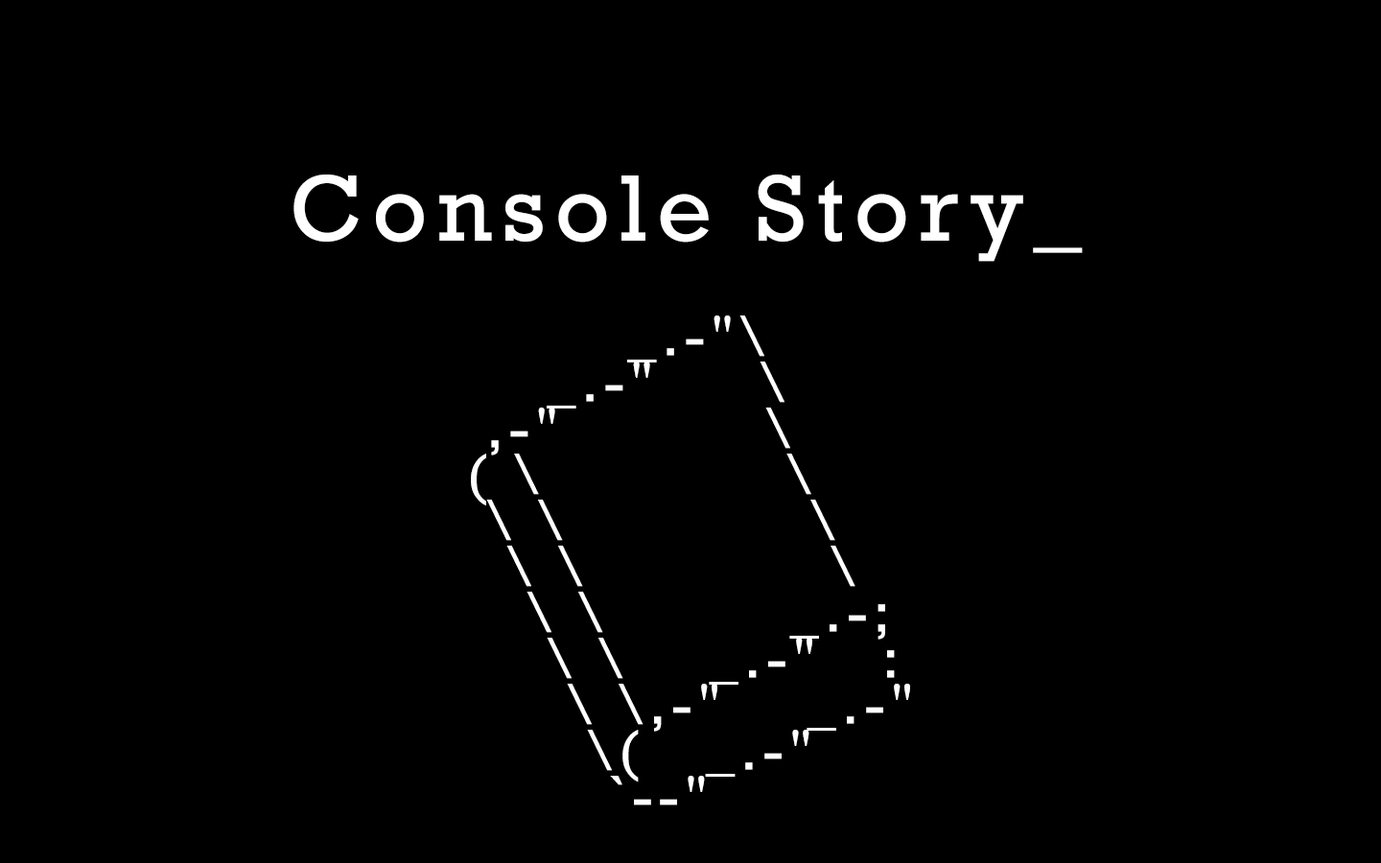
<style>
.page{position:relative;width:1381px;height:863px;background:#000000}
.page>*{position:absolute;margin:0}
.t1{font:95.9px "Rockwell";letter-spacing:0.1em;color:#ffffff}
.t2{font:57.6px/46px "Rockwell";letter-spacing:0.1em;color:#ffffff}
</style>
<div class="page">
<p class="t1" style="left:294px;top:175px;width:789px;height:87px">Console Story_</p>
<p class="t2" style="left:471px;top:316px;width:439px;height:490px">_.-"\<br>    _.-"     \<br> ,-"          \<br>( \            \<br> \ \            \<br>  \ \            \<br>   \ \         _.-;<br>    \ \    _.-"   :<br>     \ \,-"    _.-"<br>      \(   _.-"<br>       `--"</p>
</div>
